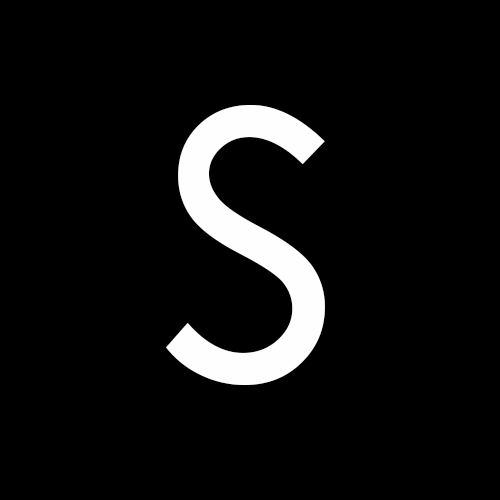
<style>
.page{position:relative;width:500px;height:500px;background:#000000}
.page>*{position:absolute;margin:0}
.t1{font:500px "CenturyGothic";color:#fefefe}
</style>
<div class="page">
<p class="t1" style="left:166px;top:105px;width:159px;height:280px">s</p>
</div>
